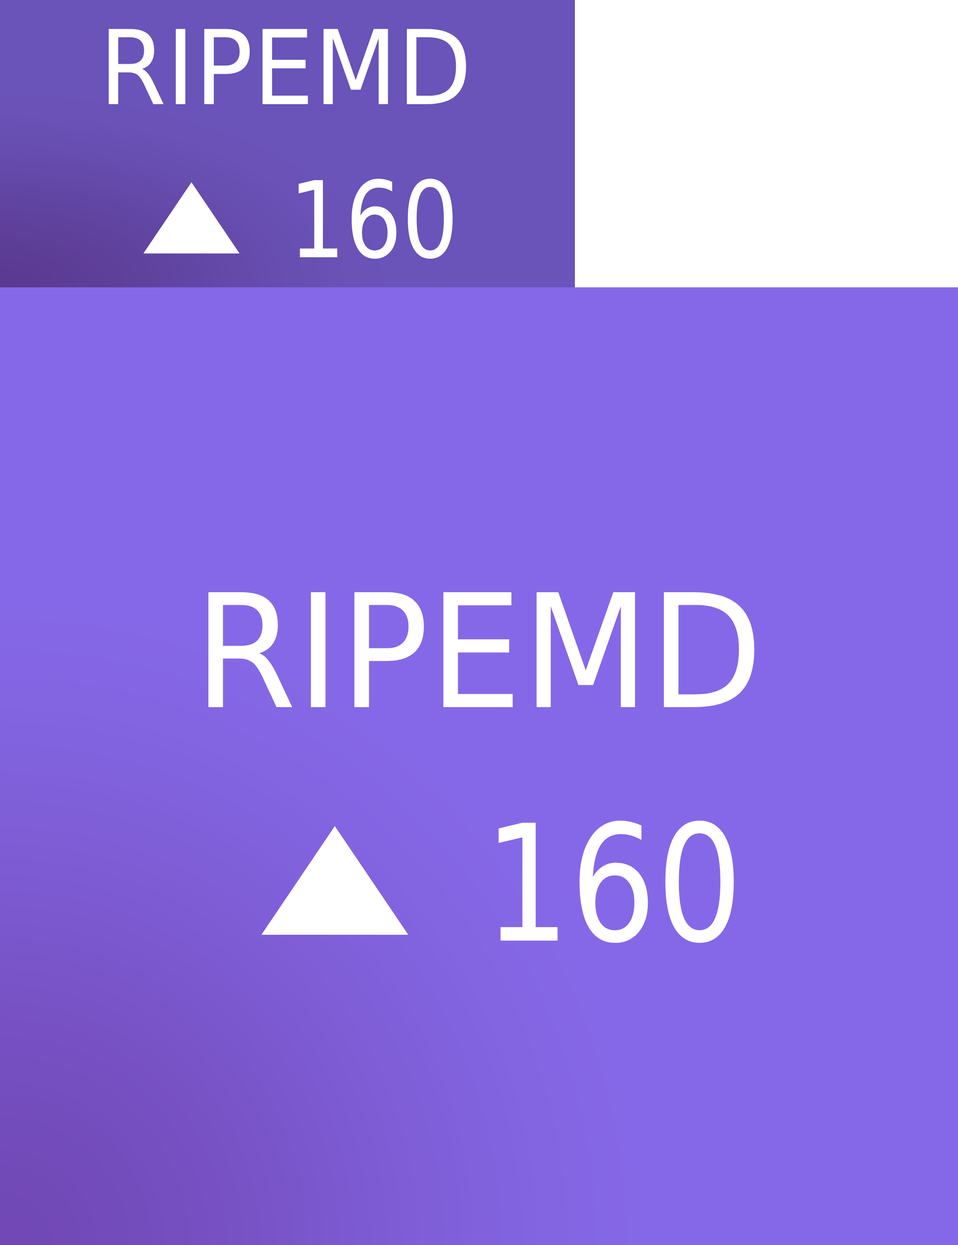
<style>
.page{position:relative;width:958px;height:1245px;background:#8568e7}
.page>*{position:absolute;margin:0}
.t1{font:103.2px "DejaVuSans";color:#ffffff;scale:0.94 1}
.t2{font:105.8px "DejaVuSans";color:#ffffff;scale:0.84 1}
.t3{font:157.6px "DejaVuSans";color:#ffffff;scale:0.94 1}
.t4{font:161.6px "DejaVuSans";color:#ffffff;scale:0.84 1}
</style>
<div class="page">
<p class="t1" style="left:109px;top:29px;width:357px;height:75px">RIPEMD</p>
<p class="t2" style="left:299px;top:179px;width:154px;height:80px">160</p>
<p class="t3" style="left:208px;top:592px;width:546px;height:115px">RIPEMD</p>
<p class="t4" style="left:498px;top:820px;width:236px;height:123px">160</p>
</div>
